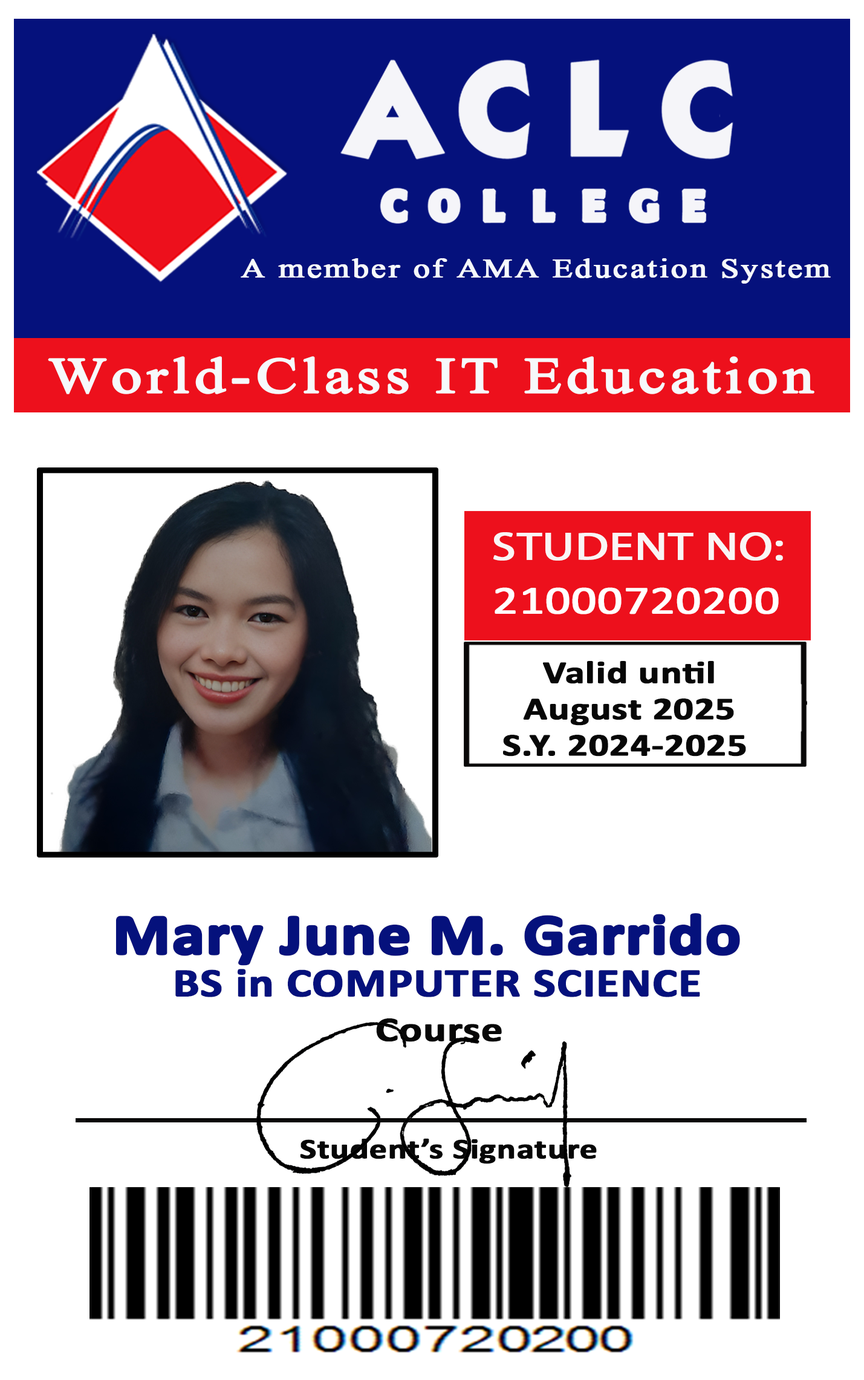
<style>
.page{position:relative;width:864px;height:1380px;background:#ffffff}
.page>*{position:absolute;margin:0}
.t1{font:33px "Aparajita";letter-spacing:0.04em;color:#f6f9fb;font-weight:bold;scale:1.23 1}
.t2{font:62.2px "Aparajita";letter-spacing:0.04em;color:#f6f9fb;font-weight:bold;scale:1.23 1}
.t3{font:39.8px "MyriadPro-Regular";color:#f9f5f5;font-weight:bold;scale:1.23 1}
.t4{font:39.9px "Calibri";color:#fffefe;font-weight:bold;scale:1.23 1}
.t5{font:32px "Calibri-Bold";color:#070707;font-weight:bold;scale:1.22 1}
.t6{font:57.1px "Calibri-Bold";color:#05117c;font-weight:bold;scale:1.14 1}
.t7{font:40.8px "Calibri-Bold";color:#05117c;font-weight:bold;scale:1.15 1}
.t8{font:34.9px "Calibri-Bold";color:#070707;font-weight:bold;scale:1.22 1}
.t9{font:28.5px "Calibri-Bold";color:#070707;font-weight:bold;scale:1.22 1}
</style>
<div class="page">
<p class="t1" style="left:241px;top:258px;width:590px;height:26px">A member of AMA Education System</p>
<p class="t2" style="left:48px;top:356px;width:767px;height:38px">World-Class IT Education</p>
<p class="t3" style="left:493px;top:532px;width:290px;height:29px">STUDENT NO:</p>
<p class="t4" style="left:495px;top:587px;width:284px;height:27px">21000720200</p>
<p class="t5" style="left:503px;top:661px;width:243px;height:95px;text-align:center">Valid until<br>August 2025<br>S.Y. 2024-2025</p>
<p class="t6" style="left:115px;top:913px;width:625px;height:53px">Mary June M. Garrido</p>
<p class="t7" style="left:175px;top:969px;width:525px;height:28px">BS in COMPUTER SCIENCE</p>
<p class="t8" style="left:376px;top:1018px;width:126px;height:24px">Course</p>
<p class="t9" style="left:300px;top:1138px;width:297px;height:26px">Student’s Signature</p>
</div>
